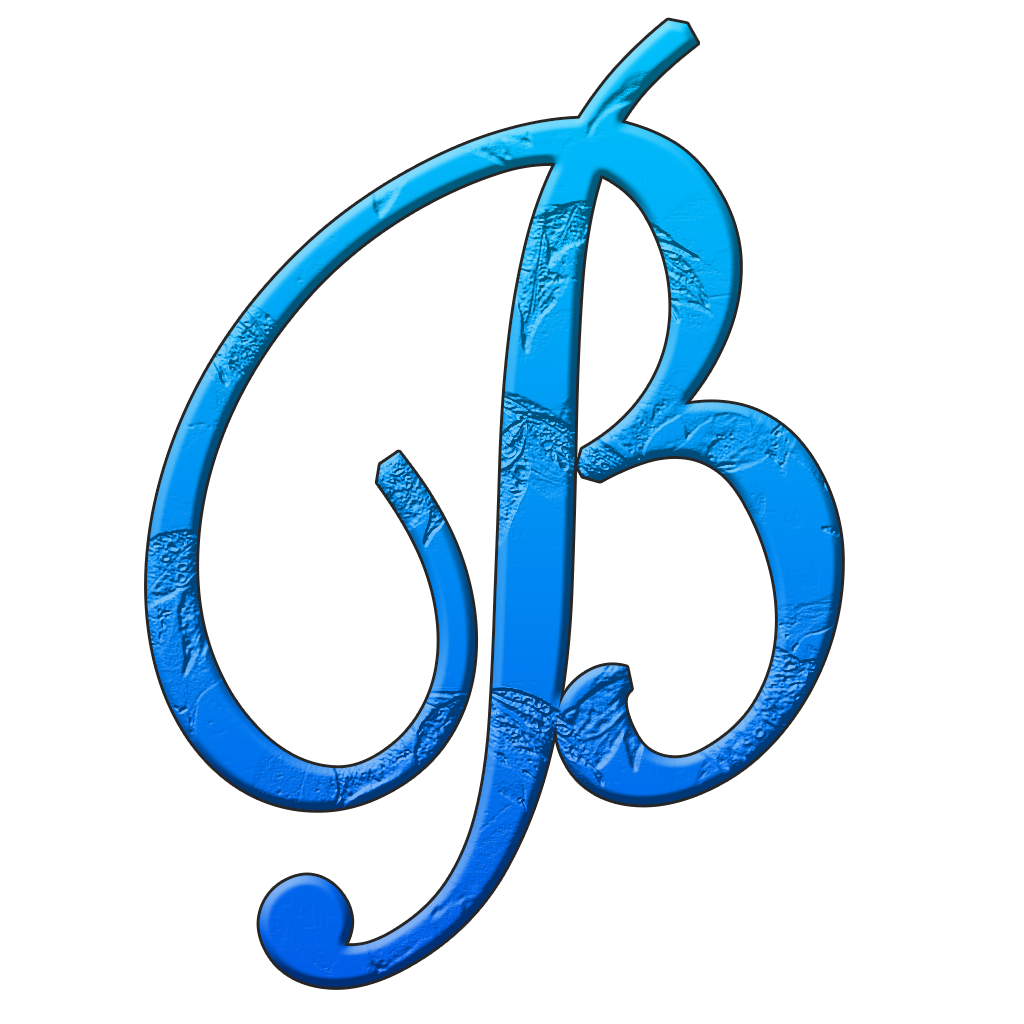
<style>
.page{position:relative;width:1024px;height:1024px;background:#ffffff}
.page>*{position:absolute;margin:0}
.t1{font:916.7px "SnellRoundhand";text-transform:uppercase;font-weight:bold}
</style>
<div class="page">
<p class="t1" style="left:147px;top:20px;width:695px;height:967px;rotate:-29deg">B</p>
</div>
